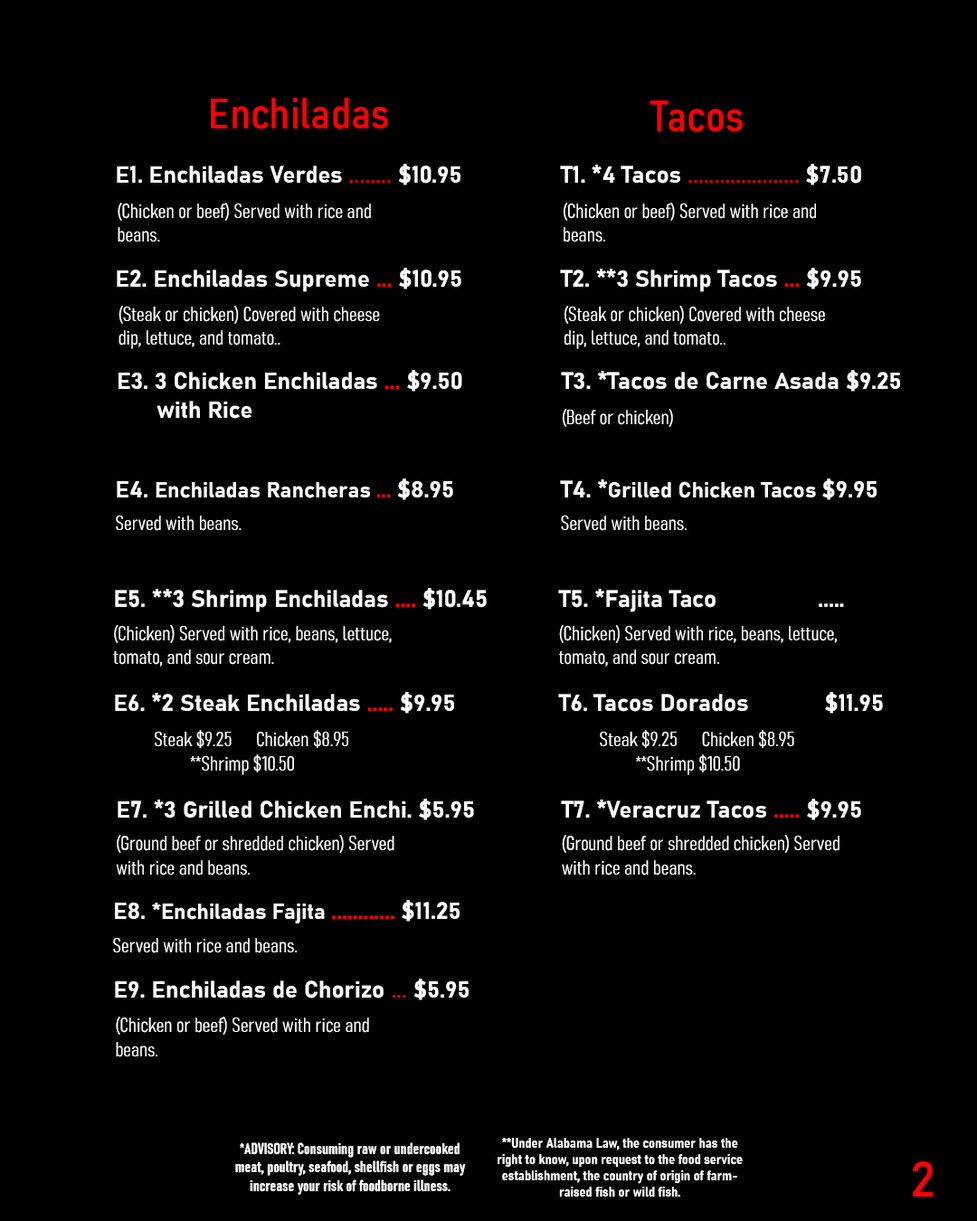
<style>
.page{position:relative;width:977px;height:1221px;background:#000000}
.page>*{position:absolute;margin:0}
.t1{font:42.9px "Bahnschrift-SemiCondensed";color:#ff0000}
.t2{font:23.5px "Bahnschrift-Bold";color:#ffffff}
.t3{font:23.5px "Bahnschrift";color:#ff0000}
.t4{font:20.1px "Bahnschrift-LightCondensed";color:#ffffff}
.t5{font:23.5px "Bahnschrift-Bold";color:#ff0000}
.t6{font:21.7px "Bahnschrift-Bold";color:#ffffff}
.t7{font:21.7px "Bahnschrift-Bold";color:#ff0000}
.t8{font:21.6px "Bahnschrift-Bold";color:#ffffff}
.t9{font:15.6px "Bahnschrift-BoldCondensed";color:#ffffff}
.t10{font:13.6px "Bahnschrift-BoldSemiCondensed";color:#ffffff}
.t11{font:48.9px "Bahnschrift";color:#ff0000}
</style>
<div class="page">
<p class="t1" style="left:211px;top:98px;width:177px;height:31px">Enchiladas</p>
<p class="t1" style="left:649px;top:100px;width:93px;height:32px">Tacos</p>
<p class="t2" style="left:117px;top:164px;width:343px;height:21px">E1. Enchiladas Verdes<span class="t3"> ........ </span>$10.95</p>
<p class="t3" style="left:560px;top:164px;width:301px;height:21px"><span class="t2">T1. *4 Tacos </span>..................... <span class="t2">$7.50</span></p>
<p class="t4" style="left:118px;top:203px;width:253px;height:39px">(Chicken or beef) Served with rice and <br>beans.</p>
<p class="t4" style="left:563px;top:203px;width:253px;height:39px">(Chicken or beef) Served with rice and <br>beans.</p>
<p class="t2" style="left:117px;top:268px;width:344px;height:24px">E2. Enchiladas Supreme <span class="t5">...</span> $10.95</p>
<p class="t2" style="left:560px;top:268px;width:301px;height:24px">T2. **3 Shrimp Tacos <span class="t5">...</span> $9.95</p>
<p class="t4" style="left:118px;top:306px;width:262px;height:43px">(Steak or chicken) Covered with cheese<br>dip, lettuce, and tomato..</p>
<p class="t4" style="left:564px;top:306px;width:261px;height:43px">(Steak or chicken) Covered with cheese<br>dip, lettuce, and tomato..</p>
<p class="t2" style="left:118px;top:370px;width:344px;height:49px">E3. 3 Chicken Enchiladas <span class="t5">...</span> $9.50<br>   with Rice</p>
<p class="t2" style="left:561px;top:370px;width:339px;height:22px">T3. *Tacos de Carne Asada $9.25</p>
<p class="t4" style="left:563px;top:409px;width:110px;height:18px">(Beef or chicken)</p>
<p class="t6" style="left:117px;top:478px;width:336px;height:22px"><span class="t2">E4. </span>Enchiladas Rancheras <span class="t7">... </span><span class="t2">$8.95</span></p>
<p class="t6" style="left:560px;top:478px;width:316px;height:22px"><span class="t2">T4. *</span>Grilled Chicken Tacos <span class="t2">$9.95</span></p>
<p class="t4" style="left:116px;top:515px;width:125px;height:16px">Served with beans.</p>
<p class="t4" style="left:561px;top:515px;width:125px;height:16px">Served with beans.</p>
<p class="t2" style="left:115px;top:588px;width:372px;height:24px">E5. **3 Shrimp Enchiladas <span class="t5">....</span> $10.45</p>
<p class="t2" style="left:558px;top:589px;width:286px;height:23px">T5. *Fajita Taco                .....</p>
<p class="t4" style="left:113px;top:625px;width:279px;height:42px">(Chicken) Served with rice, beans, lettuce,<br>tomato, and sour cream.</p>
<p class="t4" style="left:559px;top:625px;width:278px;height:42px">(Chicken) Served with rice, beans, lettuce,<br>tomato, and sour cream.</p>
<p class="t2" style="left:115px;top:692px;width:339px;height:22px">E6. *2 Steak Enchiladas <span class="t5">.....</span> $9.95</p>
<p class="t2" style="left:558px;top:692px;width:325px;height:22px">T6. Tacos Dorados            $11.95</p>
<p class="t4" style="left:155px;top:730px;width:193px;height:45px">Steak $9.25      Chicken $8.95<br>         **Shrimp $10.50</p>
<p class="t4" style="left:600px;top:730px;width:194px;height:45px">Steak $9.25      Chicken $8.95<br>         **Shrimp $10.50</p>
<p class="t2" style="left:118px;top:799px;width:356px;height:21px">E7. *3 Grilled Chicken Enchi. $5.95</p>
<p class="t2" style="left:561px;top:799px;width:300px;height:21px">T7. *Veracruz Tacos <span class="t5">.....</span> $9.95</p>
<p class="t4" style="left:116px;top:835px;width:278px;height:40px">(Ground beef or shredded chicken) Served<br>with rice and beans.</p>
<p class="t4" style="left:562px;top:835px;width:277px;height:40px">(Ground beef or shredded chicken) Served<br>with rice and beans.</p>
<p class="t8" style="left:115px;top:900px;width:344px;height:23px"><span class="t2">E8. </span>*Enchiladas Fajita <span class="t5">............</span><span class="t2"> $11.25</span></p>
<p class="t4" style="left:113px;top:938px;width:184px;height:15px">Served with rice and beans.</p>
<p class="t2" style="left:115px;top:979px;width:353px;height:21px">E9. Enchiladas de Chorizo <span class="t3">... </span>$5.95</p>
<p class="t4" style="left:116px;top:1016px;width:253px;height:41px">(Chicken or beef) Served with rice and <br>beans.</p>
<p class="t9" style="left:235px;top:1142px;width:231px;height:53px;text-align:center">*ADVISORY: Consuming raw or undercooked<br>meat, poultry, seafood, shellfish or eggs may<br>increase your risk of foodborne illness.</p>
<p class="t10" style="left:497px;top:1138px;width:245px;height:59px;text-align:center">**Under Alabama Law, the consumer has the<br>right to know, upon request to the food service<br>establishment, the country of origin of farm-<br>raised fish or wild fish.</p>
<p class="t11" style="left:912px;top:1161px;width:20px;height:35px">2</p>
</div>
